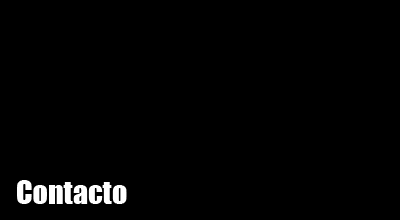
<style>
.page{position:relative;width:400px;height:220px;background:#000000}
.page>*{position:absolute;margin:0}
.t1{font:30px "Impact";color:#ffffff}
</style>
<div class="page">
<p class="t1" style="left:17px;top:180px;width:110px;height:24px">Contacto</p>
</div>
